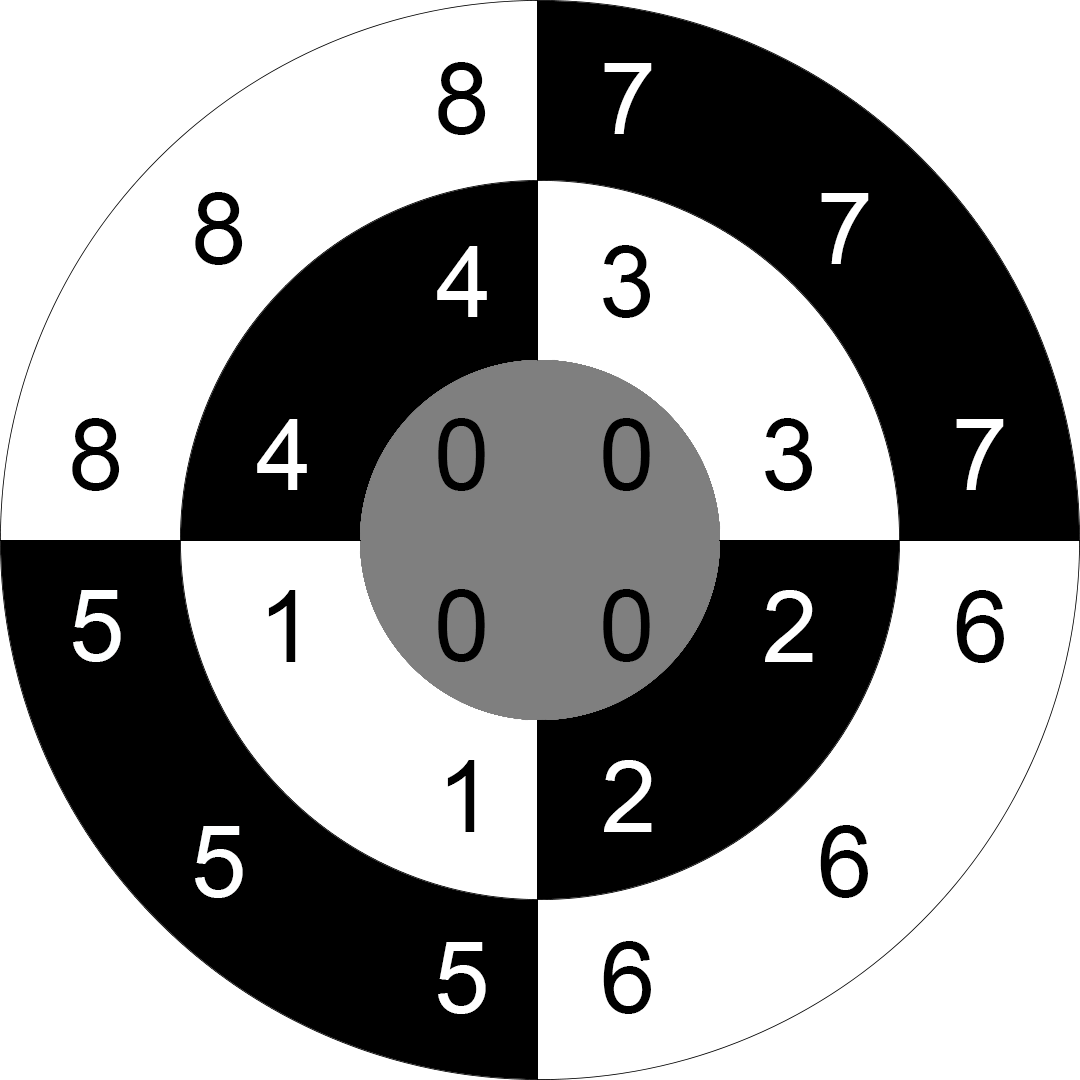
<style>
.page{position:relative;width:1080px;height:1080px;background:#ffffff}
.page>*{position:absolute;margin:0}
.t1{font:100px "ArialMT";color:#000000}
.t2{font:100px "ArialMT";color:#ffffff}
.t3{font:100px "ArialMT";color:#feffff}
</style>
<div class="page">
<p class="t1" style="left:438px;top:62px;width:48px;height:73px">8</p>
<p class="t2" style="left:604px;top:63px;width:48px;height:71px">7</p>
<p class="t1" style="left:195px;top:192px;width:48px;height:73px">8</p>
<p class="t2" style="left:821px;top:193px;width:48px;height:71px">7</p>
<p class="t2" style="left:437px;top:246px;width:50px;height:71px">4</p>
<p class="t1" style="left:603px;top:245px;width:47px;height:73px">3</p>
<p class="t1" style="left:72px;top:418px;width:48px;height:73px">8</p>
<p class="t2" style="left:257px;top:419px;width:50px;height:71px">4</p>
<p class="t1" style="left:438px;top:418px;width:47px;height:73px">0</p>
<p class="t1" style="left:603px;top:418px;width:47px;height:73px">0</p>
<p class="t1" style="left:765px;top:418px;width:47px;height:73px">3</p>
<p class="t2" style="left:956px;top:419px;width:48px;height:71px">7</p>
<p class="t3" style="left:73px;top:590px;width:48px;height:72px">5</p>
<p class="t1" style="left:268px;top:590px;width:28px;height:72px">1</p>
<p class="t1" style="left:438px;top:589px;width:47px;height:73px">0</p>
<p class="t1" style="left:603px;top:589px;width:47px;height:73px">0</p>
<p class="t2" style="left:765px;top:590px;width:48px;height:72px">2</p>
<p class="t1" style="left:956px;top:590px;width:48px;height:73px">6</p>
<p class="t1" style="left:447px;top:760px;width:28px;height:72px">1</p>
<p class="t2" style="left:604px;top:760px;width:48px;height:72px">2</p>
<p class="t3" style="left:195px;top:826px;width:48px;height:72px">5</p>
<p class="t1" style="left:820px;top:825px;width:48px;height:73px">6</p>
<p class="t2" style="left:438px;top:942px;width:48px;height:72px">5</p>
<p class="t1" style="left:603px;top:941px;width:48px;height:73px">6</p>
</div>
